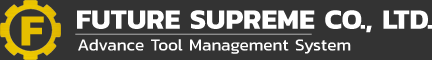
<style>
.page{position:relative;width:432px;height:60px;background:#333333}
.page>*{position:absolute;margin:0}
.t1{font:45px "Kanit-Bold";color:#e6bf00;text-transform:uppercase}
.t2{font:28.1px "Kanit-Bold";color:#ffffff;text-transform:uppercase}
.t3{font:16.9px "Kanit-Regular";color:#ffffff}
</style>
<div class="page">
<p class="t1" style="left:21px;top:16px;width:23px;height:30px">F</p>
<p class="t2" style="left:77px;top:10px;width:355px;height:23px">Future supreme co., ltd.</p>
<p class="t3" style="left:78px;top:39px;width:273px;height:15px">Advance Tool Management System</p>
</div>
